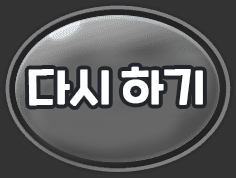
<style>
.page{position:relative;width:236px;height:178px;background:#333333}
.page>*{position:absolute;margin:0}
.t1{font:48px "CookieRun-Regular";letter-spacing:-0.075em;color:#ffffff;font-weight:bold}
</style>
<div class="page">
<p class="t1" style="left:28px;top:66px;width:175px;height:40px">다시 하기</p>
</div>
